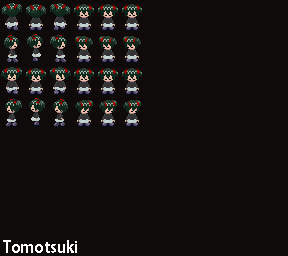
<style>
.page{position:relative;width:288px;height:256px;background:#100b0b}
.page>*{position:absolute;margin:0}
.t1{font:16px "KozGoPr6N-Bold";color:#ffffff}
</style>
<div class="page">
<p class="t1" style="left:3px;top:240px;width:74px;height:13px">Tomotsuki</p>
</div>
